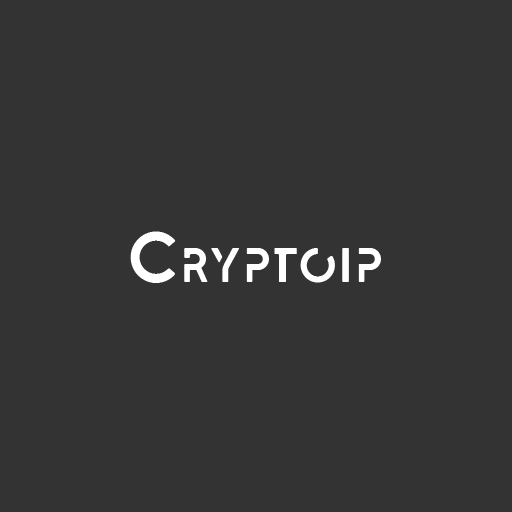
<style>
.page{position:relative;width:512px;height:512px;background:#333333}
.page>*{position:absolute;margin:0}
.t1{font:48px "LEIXO-DEMO";color:#ffffff}
.t2{font:72px "LEIXO-DEMO";color:#ffffff}
</style>
<div class="page">
<p class="t1" style="left:130px;top:231px;width:251px;height:52px"><span class="t2">C</span>RYPTOIP</p>
</div>
